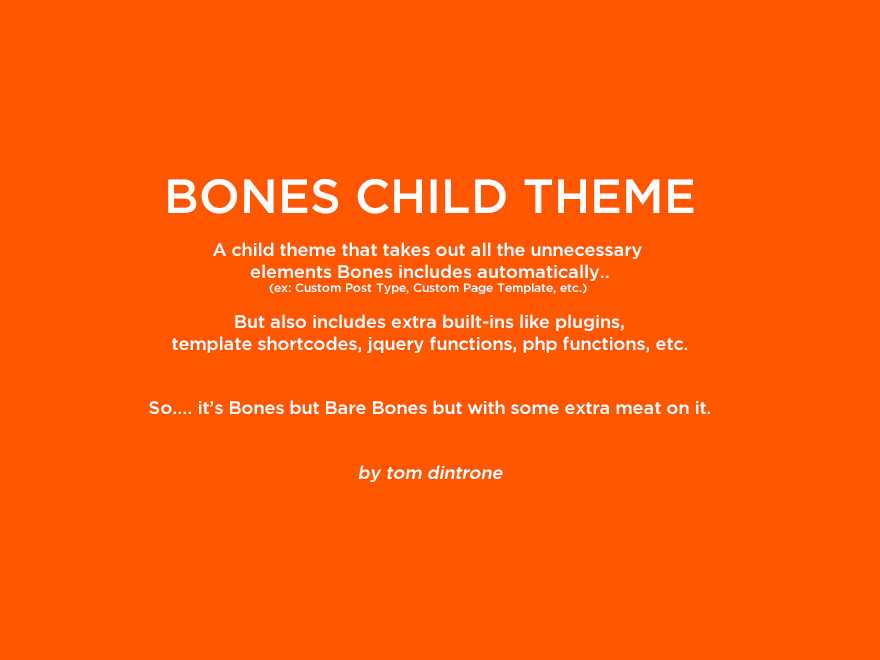
<style>
.page{position:relative;width:880px;height:660px;background:#ff5600}
.page>*{position:absolute;margin:0}
.t1{font:18px "GothamMedium";color:#ffffff}
.t2{font:48px "GothamMedium";color:#ffffff;text-transform:uppercase}
.t3{font:12px "GothamMedium";color:#ffffff}
.t4{font:18px "GothamMedium";color:#ffffff;font-style:italic}
</style>
<div class="page">
<p class="t1" style="left:149px;top:179px;width:561px;height:303px;text-align:center"><span class="t2">Bones Child Theme<br></span><br>A child theme that takes out all the unnecessary <br>elements Bones includes automatically..<br><span class="t3">(ex: Custom Post Type, Custom Page Template, etc.) <br><br> </span>But also includes extra built-ins like plugins, <br>template shortcodes, jquery functions, php functions, etc.<br><br><br>So.... it’s Bones but Bare Bones but with some extra meat on it.<br><br><br><span class="t4">by tom dintrone</span></p>
</div>
